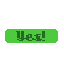
<style>
.page{position:relative;width:64px;height:64px;background:#ffffff}
.page>*{position:absolute;margin:0}
.t1{font:14px "Superscript";color:#236a25}
</style>
<div class="page">
<p class="t1" style="left:16px;top:31px;width:29px;height:10px">Yes!</p>
</div>
